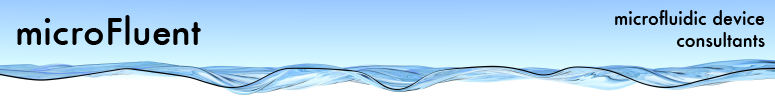
<style>
.page{position:relative;width:775px;height:100px}
.page>*{position:absolute;margin:0}
.t1{font:36px "Station-Medium";color:#000000}
.t2{font:18px "Station-Medium";color:#000000}
</style>
<div class="page">
<p class="t1" style="left:17px;top:15px;width:184px;height:30px">microFluent</p>
<p class="t2" style="left:615px;top:10px;width:150px;height:37px;text-align:right">microfluidic device<br>consultants</p>
</div>
